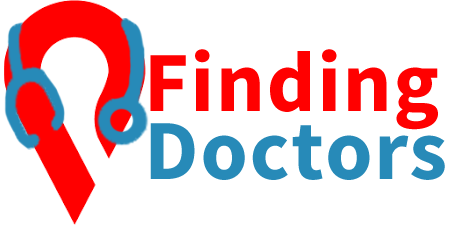
<style>
.page{position:relative;width:449px;height:225px;background:#ffffff}
.page>*{position:absolute;margin:0}
.t1{font:85.7px "SourceSansPro-Bold";letter-spacing:0.02em;color:#ff0000}
.t2{font:85.7px "SourceSansPro-Bold";letter-spacing:0.02em;color:#278ab8}
</style>
<div class="page">
<p class="t1" style="left:150px;top:49px;width:288px;height:81px">Finding</p>
<p class="t2" style="left:150px;top:123px;width:295px;height:57px">Doctors</p>
</div>
